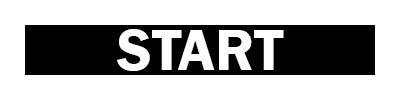
<style>
.page{position:relative;width:400px;height:100px;background:#ffffff}
.page>*{position:absolute;margin:0}
.t1{font:60px "FranklinGothic-Demi";color:#ffffff}
</style>
<div class="page">
<p class="t1" style="left:117px;top:29px;width:167px;height:42px">START</p>
</div>
